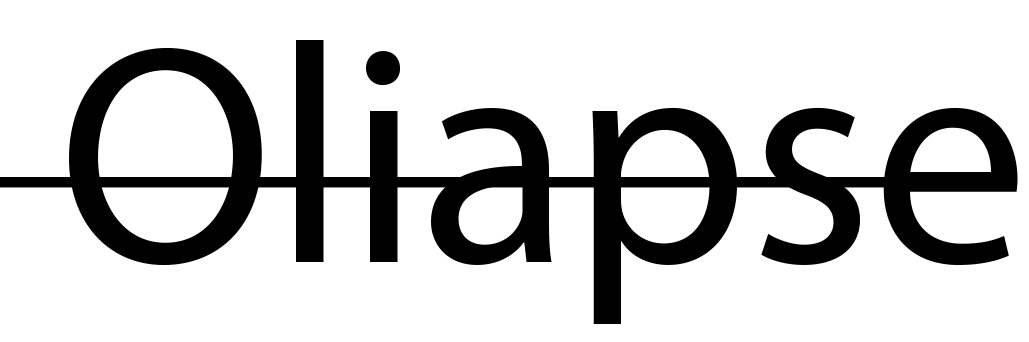
<style>
.page{position:relative;width:1029px;height:342px;background:#ffffff}
.page>*{position:absolute;margin:0}
.t1{font:312.5px "MyriadPro-Regular";color:#000000}
</style>
<div class="page">
<p class="t1" style="left:69px;top:40px;width:949px;height:284px">Oliapse</p>
</div>
